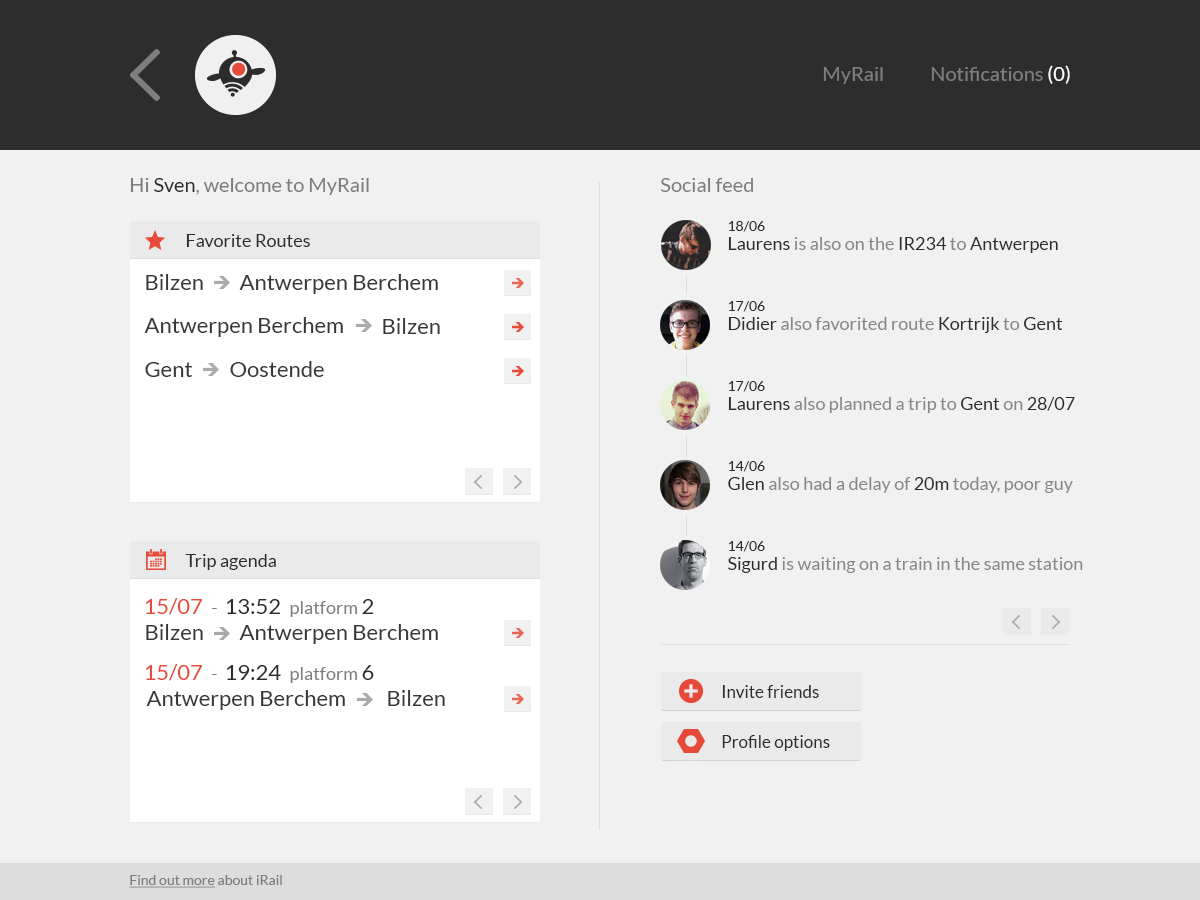
<style>
.page{position:relative;width:1200px;height:900px;background:#f1f1f1}
.page>*{position:absolute;margin:0}
.t1{font:20px "Lato-Regular";color:#7e7e7e}
.t2{font:20px "Lato-Regular";color:#ffffff}
.t3{font:20px "Lato-Regular";color:#2d2d2d}
.t4{font:14px "Lato-Regular";color:#2d2d2d}
.t5{font:18px "Lato-Regular";color:#2d2d2d}
.t6{font:18px "Lato-Regular";color:#878787}
.t7{font:22px "Lato-Regular";color:#383838}
.t8{font:18px "Lato-Regular";color:#7e7e7e}
.t9{font:22px "Lato-Regular";color:#e74b3b}
.t10{font:22px "Lato-Regular";color:#2d2d2d}
.t11{font:17px "Lato-Regular";color:#2d2d2d}
.t12{font:14px "Lato-Regular";color:#7e7e7e;text-decoration:underline}
.t13{font:14px "Lato-Regular";color:#7e7e7e}
</style>
<div class="page">
<p class="t1" style="left:931px;top:65px;width:139px;height:19px">Notifications <span class="t2">(0)</span></p>
<p class="t1" style="left:823px;top:67px;width:60px;height:17px">MyRail</p>
<p class="t1" style="left:130px;top:178px;width:239px;height:17px">Hi <span class="t3">Sven</span>, welcome to MyRail</p>
<p class="t1" style="left:660px;top:178px;width:93px;height:14px">Social feed</p>
<p class="t4" style="left:728px;top:221px;width:37px;height:11px">18/06</p>
<p class="t5" style="left:186px;top:234px;width:124px;height:13px">Favorite Routes</p>
<p class="t6" style="left:728px;top:237px;width:330px;height:16px"><span class="t5">Laurens </span>is also on the <span class="t5">IR234 </span>to<span class="t5"> Antwerpen</span></p>
<p class="t7" style="left:146px;top:274px;width:57px;height:16px">Bilzen</p>
<p class="t7" style="left:239px;top:274px;width:199px;height:20px">Antwerpen Berchem</p>
<p class="t4" style="left:728px;top:301px;width:37px;height:11px">17/06</p>
<p class="t7" style="left:144px;top:317px;width:199px;height:20px">Antwerpen Berchem</p>
<p class="t7" style="left:383px;top:318px;width:57px;height:16px">Bilzen</p>
<p class="t6" style="left:728px;top:317px;width:335px;height:16px"><span class="t5">Didier </span>also favorited route <span class="t5">Kortrijk </span>to<span class="t5"> Gent</span></p>
<p class="t7" style="left:145px;top:362px;width:47px;height:15px">Gent</p>
<p class="t7" style="left:230px;top:361px;width:94px;height:16px">Oostende</p>
<p class="t4" style="left:728px;top:381px;width:37px;height:11px">17/06</p>
<p class="t6" style="left:728px;top:397px;width:347px;height:16px"><span class="t5">Laurens </span>also planned a trip to <span class="t5">Gent </span>on<span class="t5"> 28/07</span></p>
<p class="t4" style="left:728px;top:461px;width:37px;height:11px">14/06</p>
<p class="t6" style="left:728px;top:477px;width:345px;height:16px"><span class="t5">Glen </span>also had a delay of <span class="t5">20m </span>today, poor guy</p>
<p class="t4" style="left:728px;top:541px;width:37px;height:11px">14/06</p>
<p class="t5" style="left:185px;top:554px;width:91px;height:16px">Trip agenda</p>
<p class="t6" style="left:728px;top:557px;width:355px;height:16px"><span class="t5">Sigurd</span> is waiting on a train in the same station</p>
<p class="t8" style="left:145px;top:598px;width:229px;height:19px"><span class="t9">15/07  </span>-  <span class="t10">13:52  </span>platform <span class="t10">2</span></p>
<p class="t7" style="left:146px;top:624px;width:57px;height:16px">Bilzen</p>
<p class="t7" style="left:239px;top:624px;width:199px;height:20px">Antwerpen Berchem</p>
<p class="t8" style="left:145px;top:664px;width:229px;height:19px"><span class="t9">15/07  </span>-  <span class="t10">19:24  </span>platform <span class="t10">6</span></p>
<p class="t11" style="left:722px;top:685px;width:97px;height:13px">Invite friends</p>
<p class="t7" style="left:146px;top:690px;width:199px;height:20px">Antwerpen Berchem</p>
<p class="t7" style="left:388px;top:690px;width:57px;height:16px">Bilzen</p>
<p class="t11" style="left:722px;top:735px;width:108px;height:16px">Profile options</p>
<p class="t12" style="left:129px;top:875px;width:153px;height:13px">Find out more<span class="t13"> about iRail</span></p>
</div>
